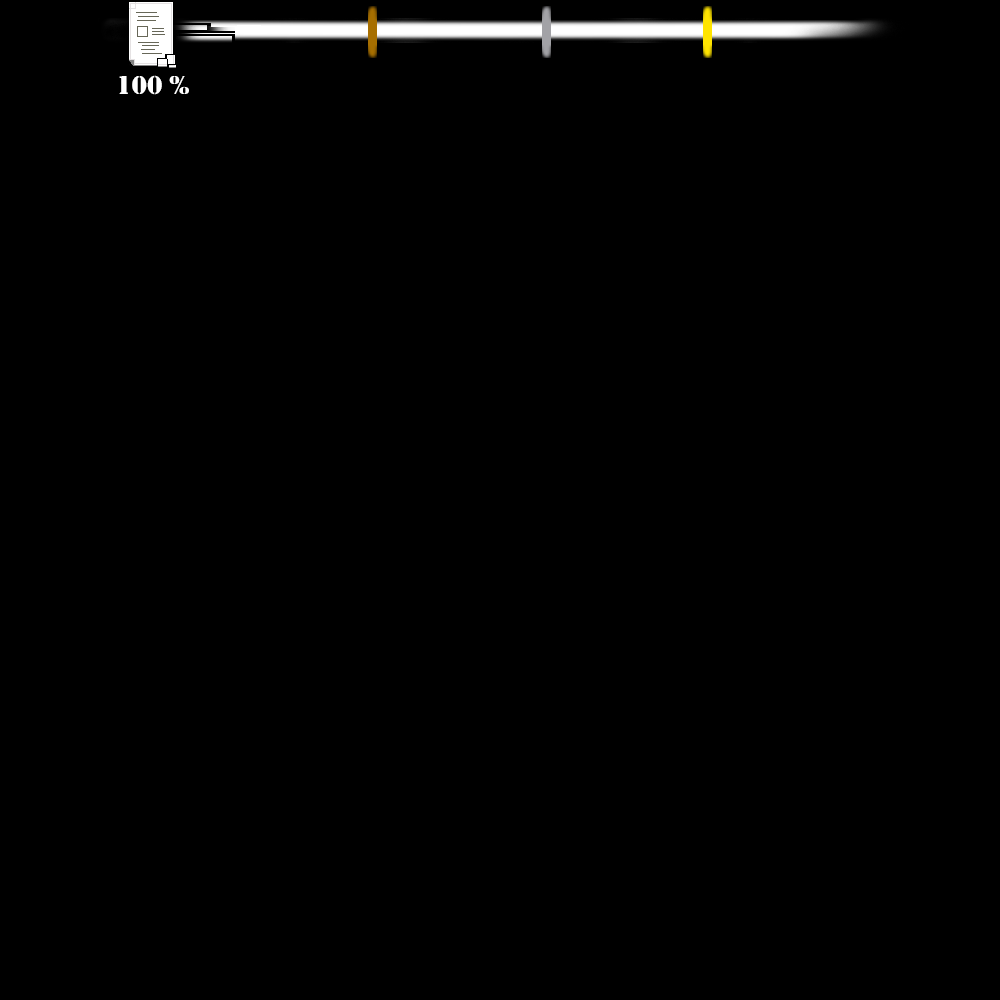
<style>
.page{position:relative;width:1000px;height:1000px;background:#000000}
.page>*{position:absolute;margin:0}
.t1{font:27.1px "Stencil";color:#ffffff}
</style>
<div class="page">
<p class="t1" style="left:119px;top:75px;width:70px;height:20px">100 %</p>
</div>
